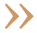
<style>
.page{position:relative;width:37px;height:33px;background:#ffffff}
.page>*{position:absolute;margin:0}
.t1{font:71.7px "BookAntiqua";color:#cc9966}
</style>
<div class="page">
<p class="t1" style="left:4px;top:3px;width:30px;height:26px">»</p>
</div>
